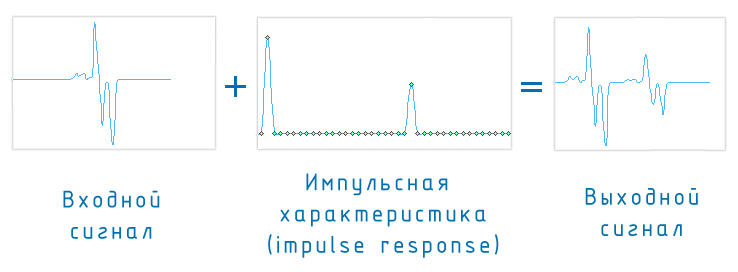
<style>
.page{position:relative;width:738px;height:272px;background:#ffffff}
.page>*{position:absolute;margin:0}
.t1{font:36px "LucidaGrande";letter-spacing:0.1em;color:#0070af}
.t2{font:26px "ISOCPEUR";letter-spacing:0.1em;color:#0070af}
</style>
<div class="page">
<p class="t1" style="left:225px;top:76px;width:21px;height:21px">+</p>
<p class="t1" style="left:521px;top:82px;width:21px;height:10px">=</p>
<p class="t2" style="left:268px;top:173px;width:231px;height:85px;text-align:center">Импульсная <br>характеристика<br>(impulse response)</p>
<p class="t2" style="left:63px;top:190px;width:97px;height:49px;text-align:center">Входной<br>сигнал</p>
<p class="t2" style="left:585px;top:188px;width:113px;height:48px;text-align:center">Выходной<br>сигнал</p>
</div>
